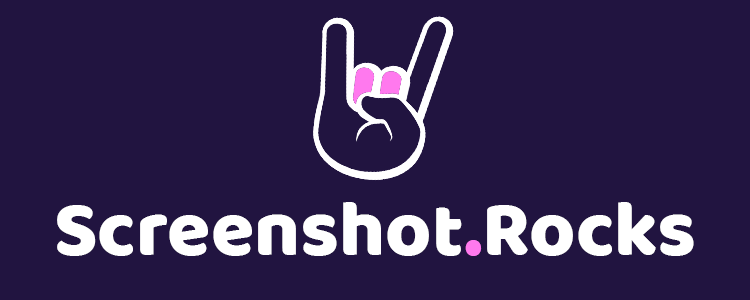
<style>
.page{position:relative;width:750px;height:300px;background:#211440}
.page>*{position:absolute;margin:0}
.t1{font:79.2px "Baloo-Regular";color:#ffffff}
.t2{font:79.2px "Baloo-Regular";color:#ff79ee}
</style>
<div class="page">
<p class="t1" style="left:57px;top:202px;width:637px;height:54px">Screenshot<span class="t2">.</span>Rocks</p>
</div>
